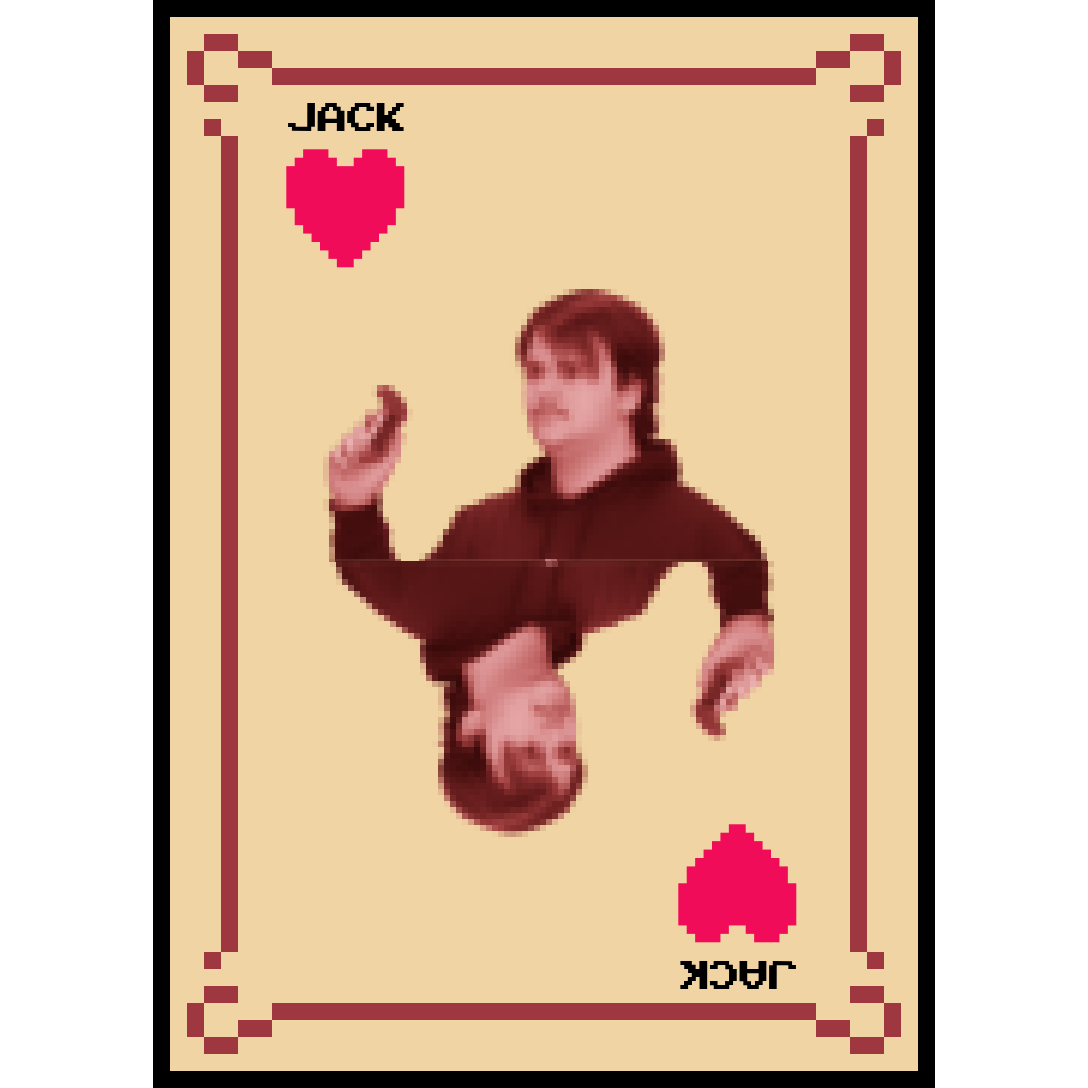
<style>
.page{position:relative;width:1088px;height:1088px;background:#f0d4a3}
.page>*{position:absolute;margin:0}
.t1{font:56.2px "ArcadeClassic";color:#000000;scale:0.96 1}
</style>
<div class="page">
<p class="t1" style="left:288px;top:102px;width:116px;height:30px">JACK</p>
<p class="t1" style="left:680px;top:960px;width:116px;height:30px;rotate:-180deg">JACK</p>
</div>
